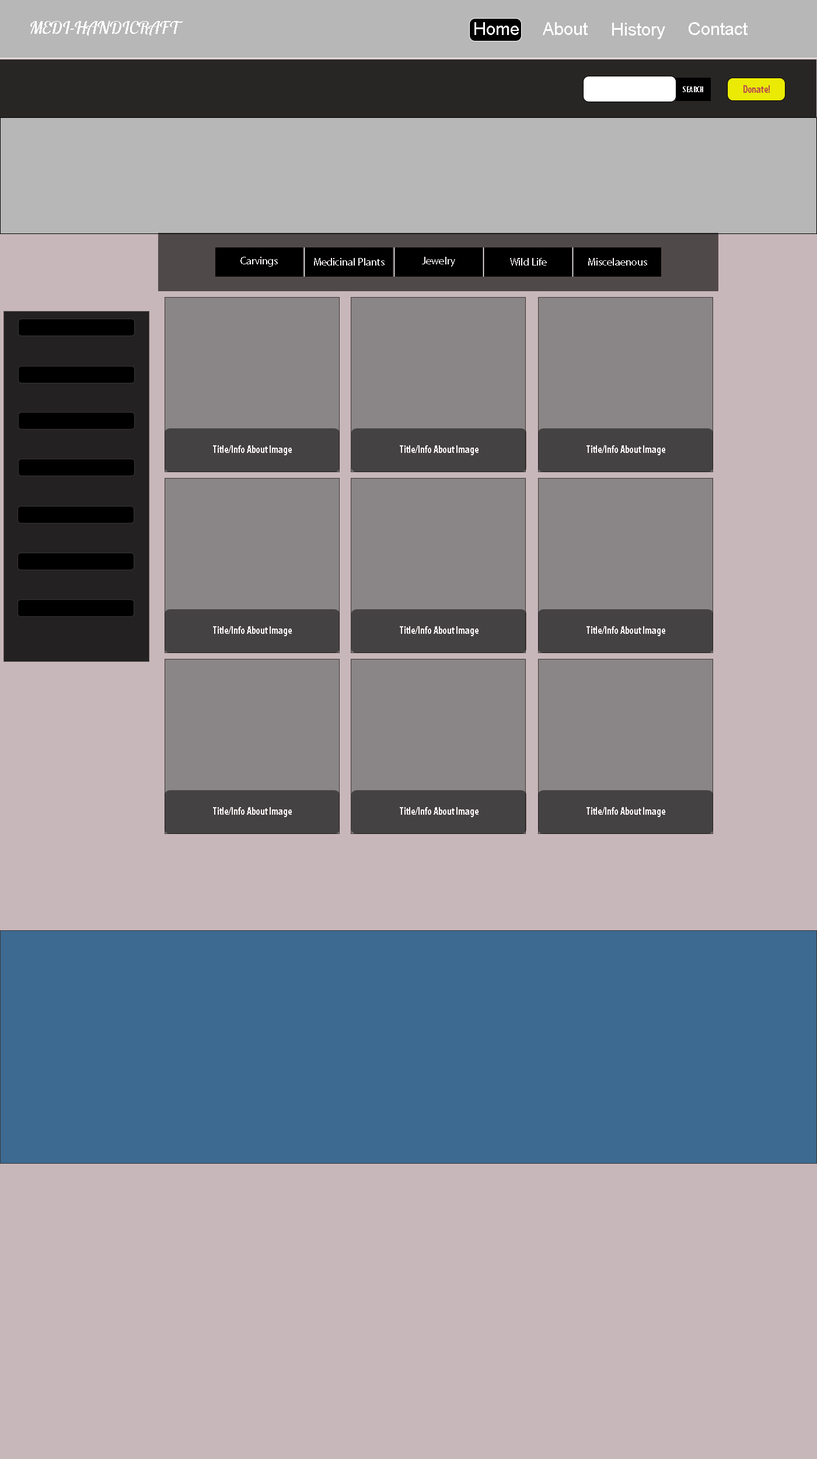
<style>
.page{position:relative;width:817px;height:1459px;background:#c8b7ba}
.page>*{position:absolute;margin:0}
.t1{font:17.5px "LobsterTwo-Italic";color:#ffffff}
.t2{font:17.5px "ArialMT";color:#ffffff}
.t3{font:8.2px "MyriadPro-BoldCond";color:#fbf7f7}
.t4{font:10.5px "MyriadPro-BoldCond";color:#b84d4d}
.t5{font:10.5px "MyriadPro-Regular";color:#fbf7f7}
.t6{font:10.5px "MyriadPro-BoldCond";color:#fbf7f7}
</style>
<div class="page">
<p class="t1" style="left:30px;top:21px;width:153px;height:15px">MEDI-HANDICRAFT</p>
<p class="t2" style="left:475px;top:22px;width:44px;height:13px">Home</p>
<p class="t2" style="left:543px;top:22px;width:45px;height:13px">About</p>
<p class="t2" style="left:612px;top:23px;width:53px;height:16px">History</p>
<p class="t2" style="left:689px;top:22px;width:59px;height:13px">Contact</p>
<p class="t3" style="left:683px;top:86px;width:20px;height:6px">SEARCH</p>
<p class="t4" style="left:744px;top:85px;width:26px;height:8px">Donate!</p>
<p class="t5" style="left:240px;top:257px;width:38px;height:10px">Carvings</p>
<p class="t5" style="left:314px;top:258px;width:71px;height:8px">Medicinal Plants</p>
<p class="t5" style="left:422px;top:257px;width:33px;height:10px">Jewelry</p>
<p class="t5" style="left:510px;top:258px;width:37px;height:8px">Wild Life</p>
<p class="t5" style="left:588px;top:258px;width:59px;height:8px">Miscelaenous</p>
<p class="t6" style="left:213px;top:445px;width:79px;height:10px">Title/Info About Image</p>
<p class="t6" style="left:400px;top:445px;width:79px;height:10px">Title/Info About Image</p>
<p class="t6" style="left:587px;top:445px;width:78px;height:10px">Title/Info About Image</p>
<p class="t6" style="left:213px;top:626px;width:79px;height:10px">Title/Info About Image</p>
<p class="t6" style="left:400px;top:626px;width:79px;height:10px">Title/Info About Image</p>
<p class="t6" style="left:587px;top:626px;width:78px;height:10px">Title/Info About Image</p>
<p class="t6" style="left:213px;top:807px;width:79px;height:10px">Title/Info About Image</p>
<p class="t6" style="left:400px;top:807px;width:79px;height:10px">Title/Info About Image</p>
<p class="t6" style="left:587px;top:807px;width:78px;height:10px">Title/Info About Image</p>
</div>
